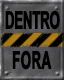
<style>
.page{position:relative;width:64px;height:80px}
.page>*{position:absolute;margin:0}
.t1{font:24px "Arial-BoldMT";letter-spacing:-0.04em;color:#000000;text-transform:uppercase;font-weight:bold;scale:0.55 1}
.t2{font:24px "Arial-BoldMT";letter-spacing:0.01em;color:#000000;text-transform:uppercase;font-weight:bold;scale:0.55 1}
</style>
<div class="page">
<p class="t1" style="left:5px;top:10px;width:55px;height:20px">DENTRO</p>
<p class="t2" style="left:12px;top:50px;width:40px;height:20px">FORA</p>
</div>
